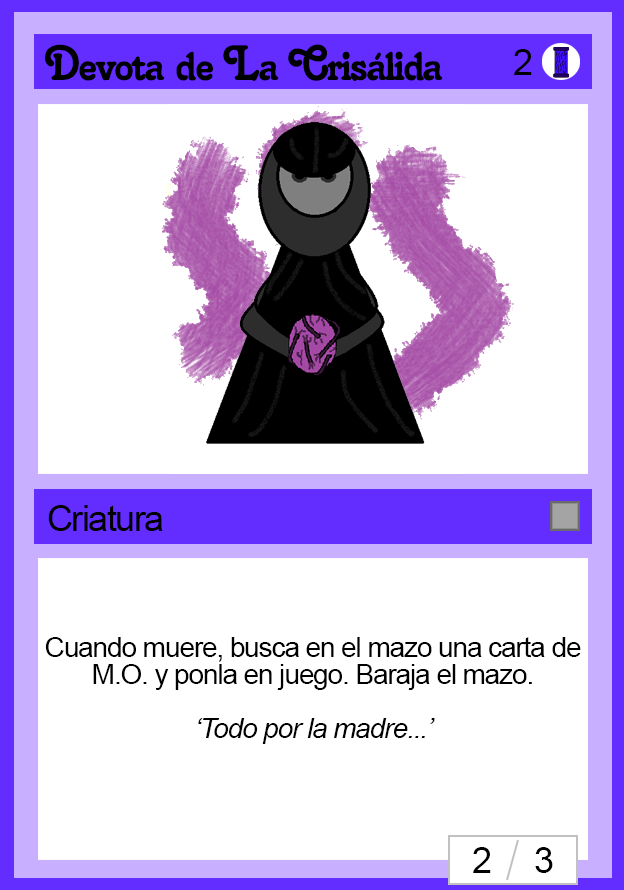
<style>
.page{position:relative;width:624px;height:890px;background:#ffffff}
.page>*{position:absolute;margin:0}
.t1{font:48px "Salina";letter-spacing:-0.04em;color:#000000}
.t2{font:36px "ArialMT";letter-spacing:-0.04em;color:#000000}
.t3{font:28px/27px "ArialMT";letter-spacing:-0.04em;color:#000000}
.t4{font:28px/27px "Arial-ItalicMT";letter-spacing:-0.04em;color:#000000}
</style>
<div class="page">
<p class="t1" style="left:45px;top:44px;width:398px;height:37px">Devota de La Crisálida</p>
<p class="t2" style="left:514px;top:49px;width:18px;height:26px">2</p>
<p class="t2" style="left:48px;top:505px;width:115px;height:26px">Criatura</p>
<p class="t3" style="left:45px;top:637px;width:536px;height:107px;text-align:center">Cuando muere, busca en el mazo una carta de M.O. y ponla en juego. Baraja el mazo.<br><br><span class="t4">‘Todo por la madre...’</span></p>
<p class="t2" style="left:473px;top:847px;width:80px;height:26px">2     3</p>
</div>
